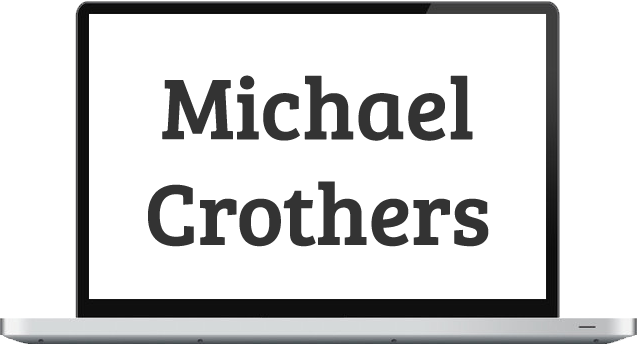
<style>
.page{position:relative;width:637px;height:352px;background:#ffffff}
.page>*{position:absolute;margin:0}
.t1{font:88px "BreeSerif-Regular";letter-spacing:-0.025em;color:#333333;font-weight:bold}
</style>
<div class="page">
<p class="t1" style="left:148px;top:75px;width:341px;height:172px;text-align:center">Michael<br>Crothers</p>
</div>
